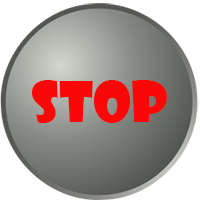
<style>
.page{position:relative;width:200px;height:200px;background:#ffffff}
.page>*{position:absolute;margin:0}
.t1{font:55px "ShowcardGothic-Reg";color:#fa0808}
</style>
<div class="page">
<p class="t1" style="left:32px;top:80px;width:135px;height:43px">stop</p>
</div>
